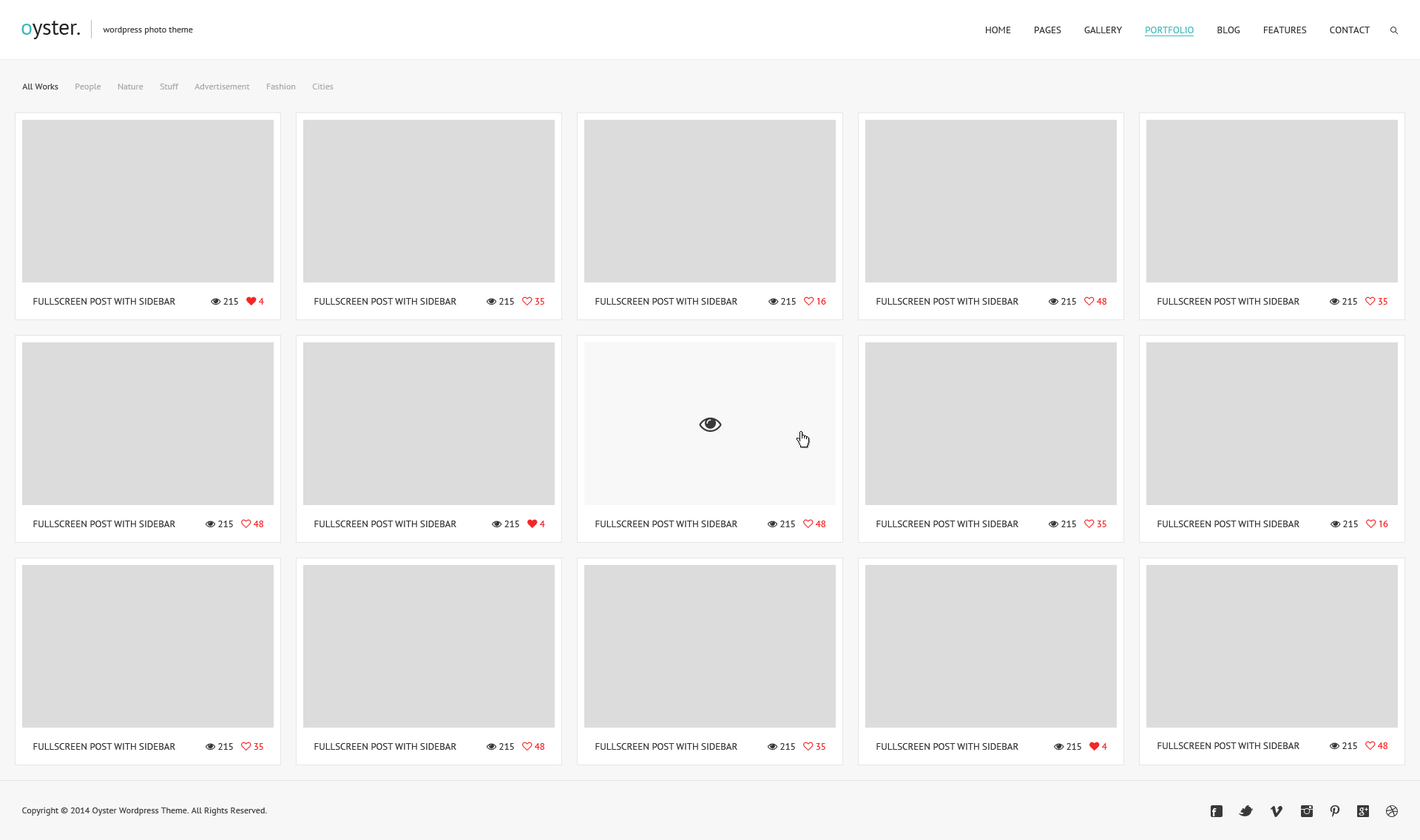
<style>
.page{position:relative;width:1420px;height:840px;background:#dcdcdc}
.page>*{position:absolute;margin:0}
.t1{font:8.9px "PTSans-Regular";color:#434343}
.t2{font:9.6px "PTSans-Regular";color:#343434;text-transform:uppercase}
.t3{font:9.6px "PTSans-Regular";color:#40b7b8;text-transform:uppercase}
.t4{font:8.9px "PTSans-Regular";color:#aaaaaa}
.t5{font:8.9px "PTSans-Regular";color:#444444}
</style>
<div class="page">
<p class="t1" style="left:103px;top:27px;width:90px;height:8px">wordpress photo theme</p>
<p class="t2" style="left:986px;top:27px;width:384px;height:6px">Home         Pages         Gallery         <span class="t3">Portfolio         </span>Blog         Features         Contact</p>
<p class="t4" style="left:22px;top:84px;width:311px;height:8px"><span class="t5">All Works      </span> People       Nature       Stuff       Advertisement       Fashion       Cities</p>
<p class="t2" style="left:33px;top:298px;width:142px;height:7px">Fullscreen Post with Sidebar</p>
<p class="t2" style="left:314px;top:298px;width:142px;height:7px">Fullscreen Post with Sidebar</p>
<p class="t2" style="left:595px;top:298px;width:142px;height:7px">Fullscreen Post with Sidebar</p>
<p class="t2" style="left:876px;top:298px;width:142px;height:7px">Fullscreen Post with Sidebar</p>
<p class="t2" style="left:1157px;top:298px;width:142px;height:7px">Fullscreen Post with Sidebar</p>
<p class="t2" style="left:33px;top:521px;width:142px;height:6px">Fullscreen Post with Sidebar</p>
<p class="t2" style="left:314px;top:521px;width:142px;height:6px">Fullscreen Post with Sidebar</p>
<p class="t2" style="left:595px;top:521px;width:142px;height:6px">Fullscreen Post with Sidebar</p>
<p class="t2" style="left:876px;top:521px;width:142px;height:6px">Fullscreen Post with Sidebar</p>
<p class="t2" style="left:1157px;top:521px;width:142px;height:6px">Fullscreen Post with Sidebar</p>
<p class="t2" style="left:33px;top:743px;width:142px;height:7px">Fullscreen Post with Sidebar</p>
<p class="t2" style="left:314px;top:743px;width:142px;height:7px">Fullscreen Post with Sidebar</p>
<p class="t2" style="left:595px;top:743px;width:142px;height:7px">Fullscreen Post with Sidebar</p>
<p class="t2" style="left:876px;top:743px;width:142px;height:7px">Fullscreen Post with Sidebar</p>
<p class="t2" style="left:1157px;top:742px;width:142px;height:7px">Fullscreen Post with Sidebar</p>
<p class="t1" style="left:22px;top:807px;width:245px;height:9px">Copyright © 2014 Oyster Wordpress Theme. All Rights Reserved.</p>
</div>
